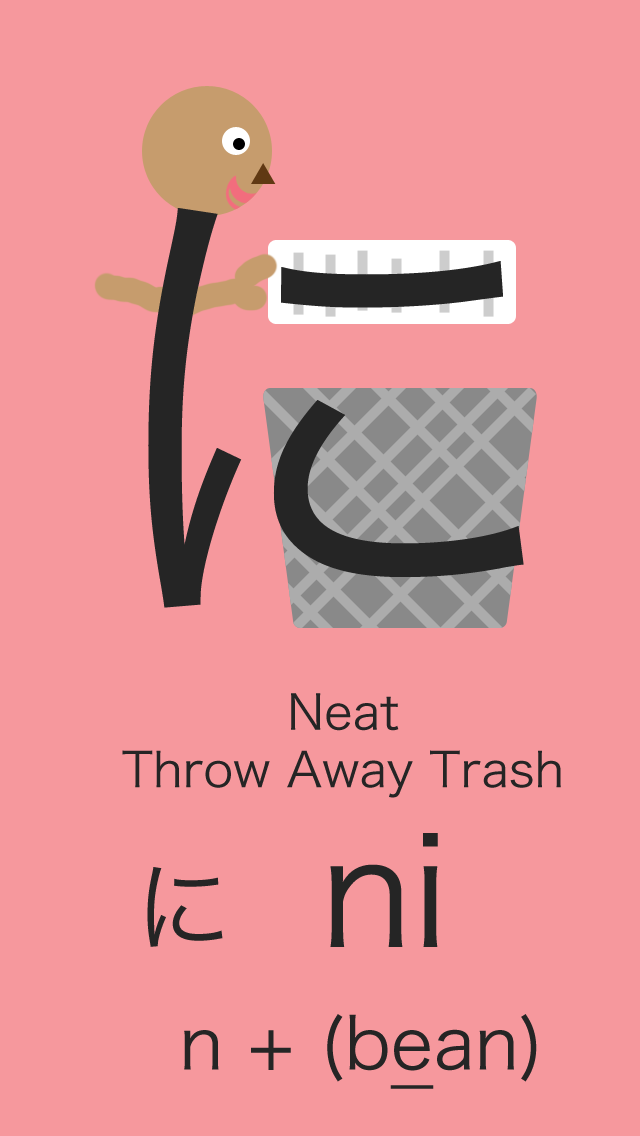
<style>
.page{position:relative;width:640px;height:1136px;background:#f6989d}
.page>*{position:absolute;margin:0}
.t1{font:500px "HiraKakuPro-W3";color:#252525}
.t2{font:48px "HiraKakuPro-W3";color:#252525}
.t3{font:150px "HiraKakuPro-W3";color:#252525}
.t4{font:100px "HiraKakuPro-W3";color:#252525}
.t5{font:72px "HiraKakuPro-W3";color:#252525}
.t6{font:72px "HiraKakuPro-W3";color:#252525;text-decoration:underline}
</style>
<div class="page">
<p class="t1" style="left:148px;top:208px;width:376px;height:400px">に</p>
<p class="t2" style="left:122px;top:693px;width:439px;height:105px;text-align:center">Neat<br>Throw Away Trash</p>
<p class="t3" style="left:330px;top:833px;width:108px;height:114px">ni</p>
<p class="t4" style="left:147px;top:867px;width:76px;height:80px">に</p>
<p class="t5" style="left:184px;top:1014px;width:353px;height:75px">n + (b<span class="t6">e</span>an)</p>
</div>
